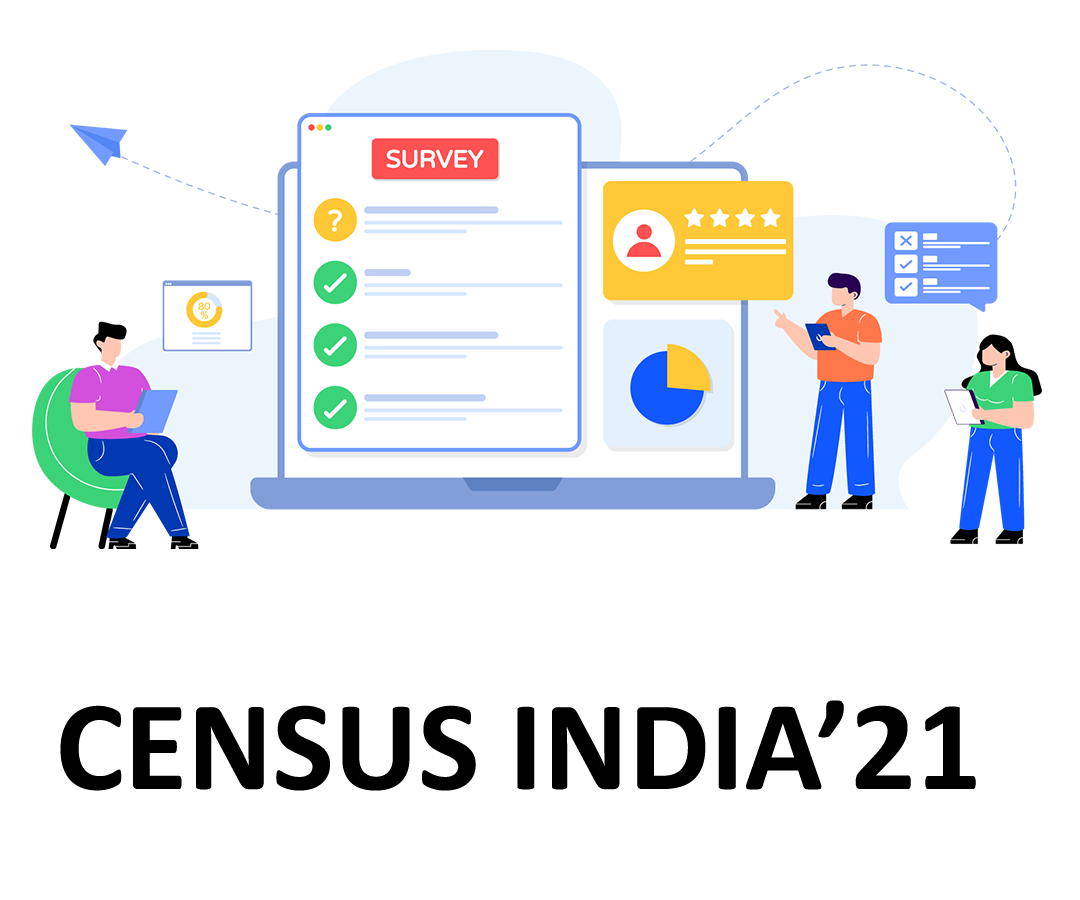
<style>
.page{position:relative;width:1080px;height:900px;background:#ffffff}
.page>*{position:absolute;margin:0}
.t1{font:129.4px "Calibri-Bold";color:#000000}
</style>
<div class="page">
<p class="t1" style="left:60px;top:700px;width:916px;height:91px">CENSUS INDIA’21</p>
</div>
